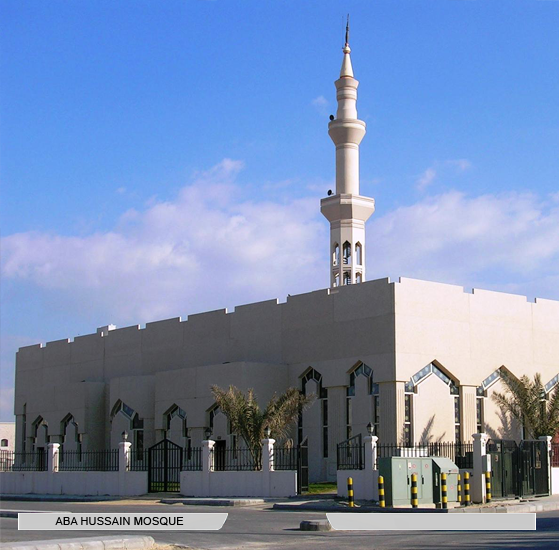
<style>
.page{position:relative;width:559px;height:550px}
.page>*{position:absolute;margin:0}
.t1{font:11.3px "ArialMT";color:#000000}
</style>
<div class="page">
<p class="t1" style="left:55px;top:517px;width:129px;height:9px">ABA HUSSAIN MOSQUE</p>
</div>
